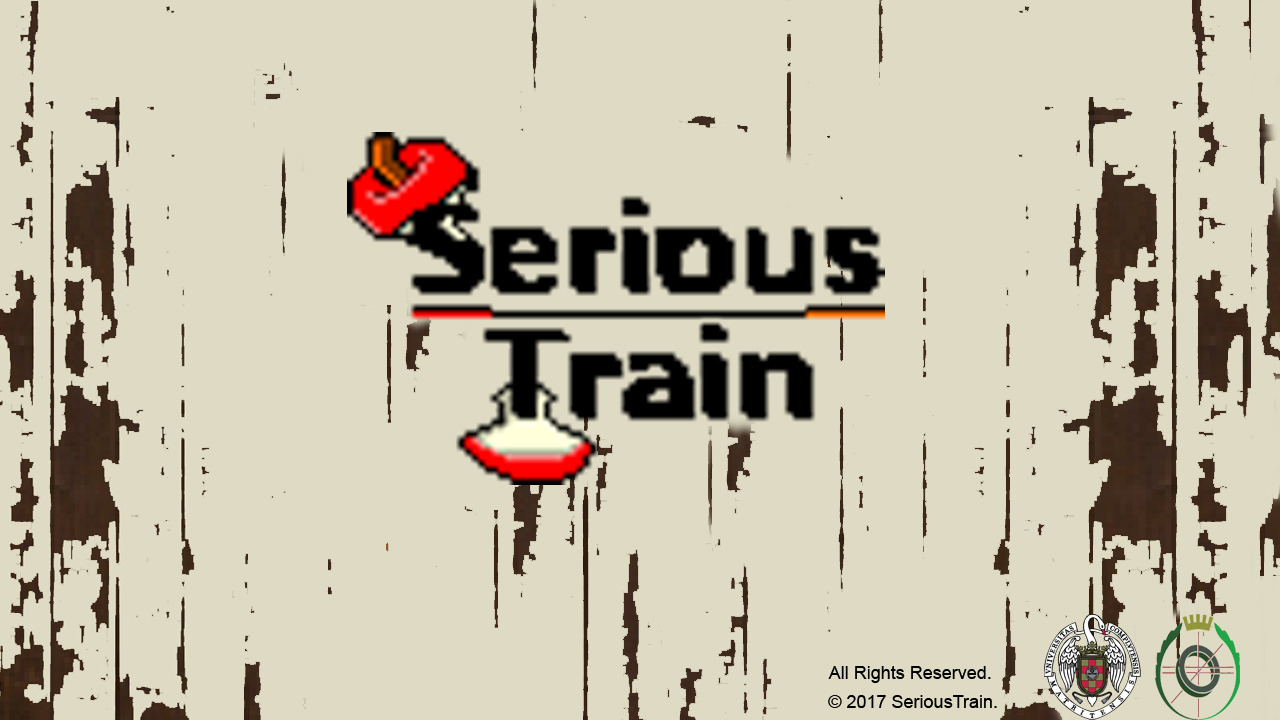
<style>
.page{position:relative;width:1280px;height:720px;background:#dedac3}
.page>*{position:absolute;margin:0}
.t1{font:18px "ArialMT";color:#000000}
</style>
<div class="page">
<p class="t1" style="left:828px;top:666px;width:163px;height:17px">All Rights Reserved.</p>
<p class="t1" style="left:828px;top:695px;width:169px;height:13px">© 2017 SeriousTrain.</p>
</div>
